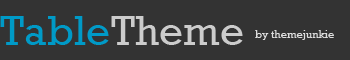
<style>
.page{position:relative;width:350px;height:60px;background:#333333}
.page>*{position:absolute;margin:0}
.t1{font:42px "Rockwell";color:#009ac7}
.t2{font:42px "Rockwell";color:#cccccc}
.t3{font:11px "Rockwell";color:#dddddd}
</style>
<div class="page">
<p class="t1" style="left:0px;top:16px;width:109px;height:29px">Table</p>
<p class="t2" style="left:111px;top:16px;width:132px;height:29px">Theme</p>
<p class="t3" style="left:255px;top:30px;width:79px;height:10px">by themejunkie</p>
</div>
